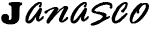
<style>
.page{position:relative;width:153px;height:32px;background:#ffffff}
.page>*{position:absolute;margin:0}
.t1{font:32px "RageItalic";color:#000000;font-weight:bold}
.t2{font:32px "CooperBlack";color:#000000;font-weight:bold}
</style>
<div class="page">
<p class="t1" style="left:1px;top:2px;width:149px;height:24px"><span class="t2">J</span>ANASCO</p>
</div>
